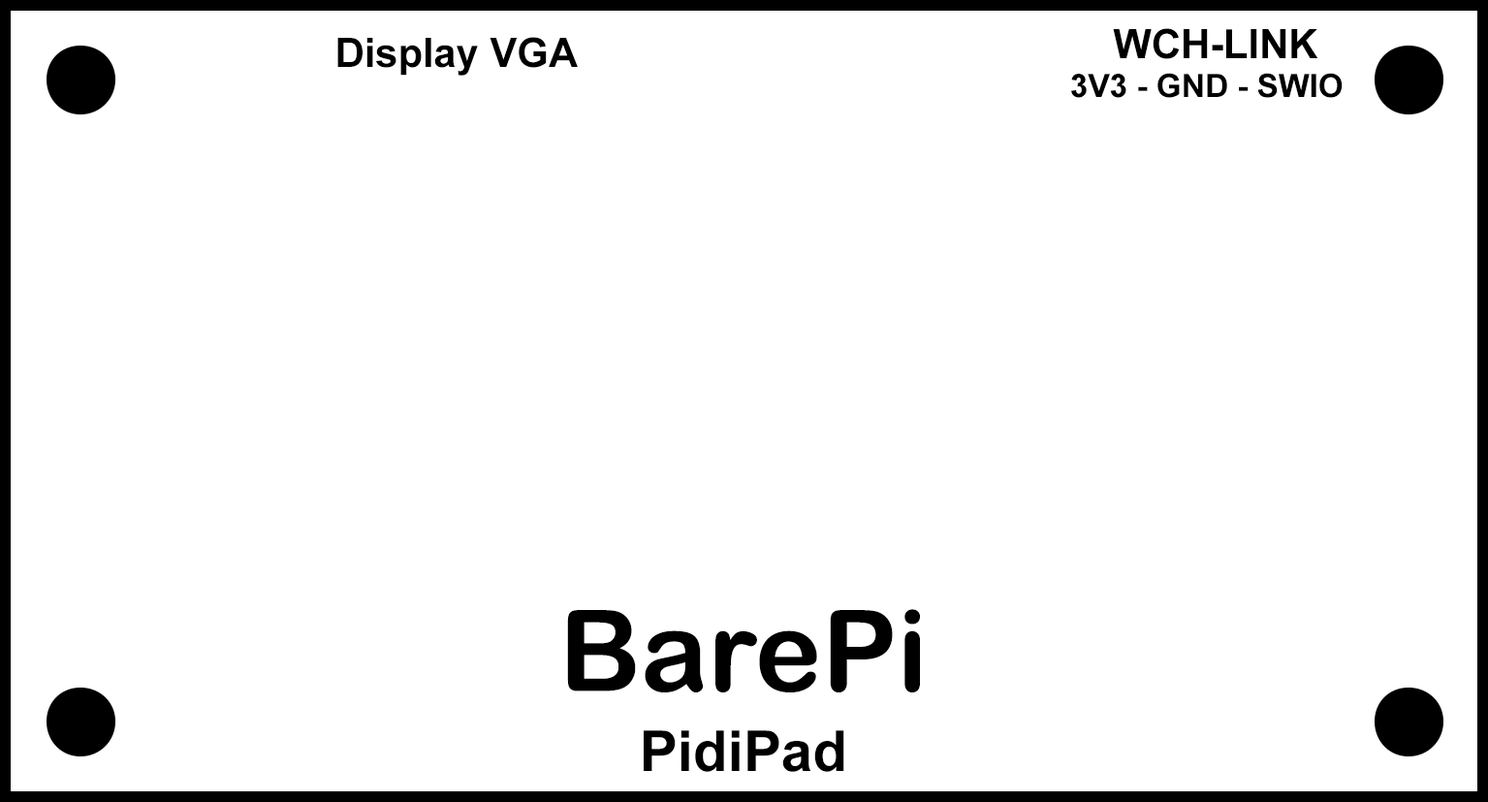
<style>
.page{position:relative;width:1488px;height:802px;background:#ffffff}
.page>*{position:absolute;margin:0}
.t1{font:32.3px "Arial-BoldMT";color:#000000}
.t2{font:40.4px "Arial-BoldMT";color:#000000}
.t3{font:112.7px "ArialRoundedMTBold";color:#000000}
.t4{font:56.5px "Arial-BoldMT";color:#000000}
</style>
<div class="page">
<p class="t1" style="left:1071px;top:28px;width:271px;height:70px;text-align:center"><span class="t2">WCH-LINK<br></span>3V3 - GND - SWIO</p>
<p class="t2" style="left:337px;top:37px;width:241px;height:39px">Display VGA</p>
<p class="t3" style="left:567px;top:609px;width:353px;height:83px">BarePi</p>
<p class="t4" style="left:644px;top:730px;width:200px;height:41px">PidiPad</p>
</div>
